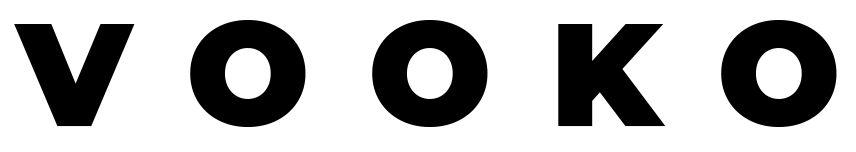
<style>
.page{position:relative;width:856px;height:152px;background:#ffffff}
.page>*{position:absolute;margin:0}
.t1{font:145.8px "Montserrat-Black";letter-spacing:0.4em;color:#000000}
</style>
<div class="page">
<p class="t1" style="left:14px;top:20px;width:823px;height:107px">VOOKO</p>
</div>
